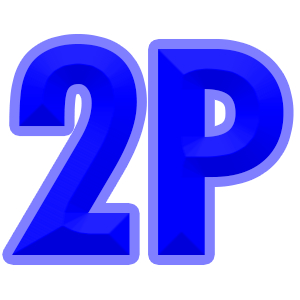
<style>
.page{position:relative;width:300px;height:300px;background:#ffffff}
.page>*{position:absolute;margin:0}
.t1{font:316px "TwCenMT-CondensedExtraBold";letter-spacing:-0.06em;color:#0000ff}
</style>
<div class="page">
<p class="t1" style="left:12px;top:44px;width:272px;height:211px">2P</p>
</div>
